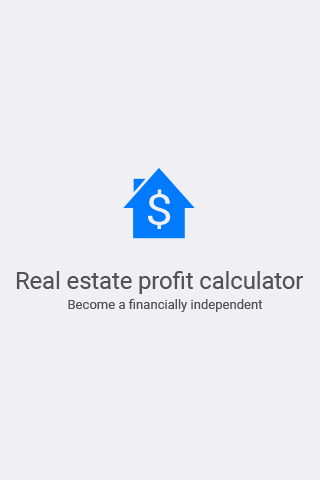
<style>
.page{position:relative;width:320px;height:480px;background:#efeff4}
.page>*{position:absolute;margin:0}
.t1{font:42.6px "Roboto-Regular";color:#efeff4;scale:1.15 1}
.t2{font:23.7px "Roboto-Regular";color:#525252}
.t3{font:13.1px "Roboto-Regular";color:#525252}
</style>
<div class="page">
<p class="t1" style="left:148px;top:189px;width:23px;height:40px">$</p>
<p class="t2" style="left:16px;top:271px;width:288px;height:23px">Real estate profit calculator</p>
<p class="t3" style="left:68px;top:299px;width:195px;height:13px">Become a financially independent</p>
</div>
